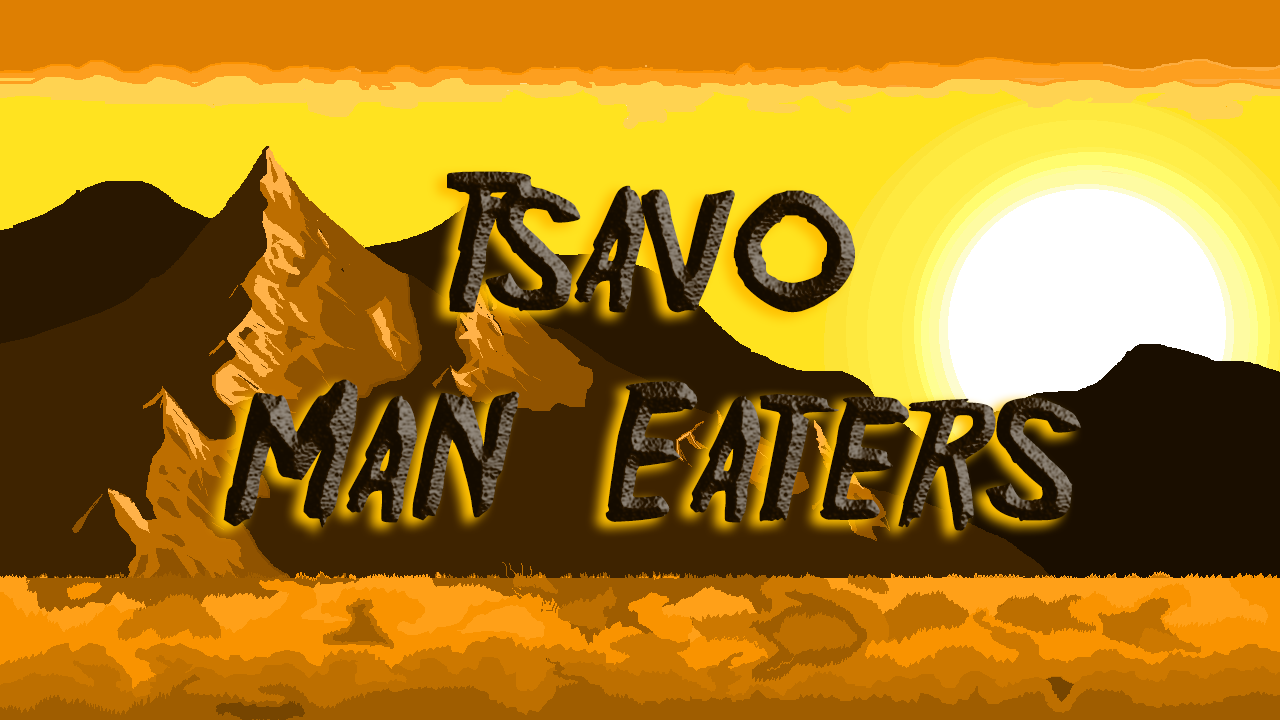
<style>
.page{position:relative;width:1280px;height:720px}
.page>*{position:absolute;margin:0}
.t1{font:175px "Friday13";color:#291700}
</style>
<div class="page">
<p class="t1" style="left:223px;top:171px;width:858px;height:360px;text-align:center">Tsavo Man-Eaters</p>
</div>
